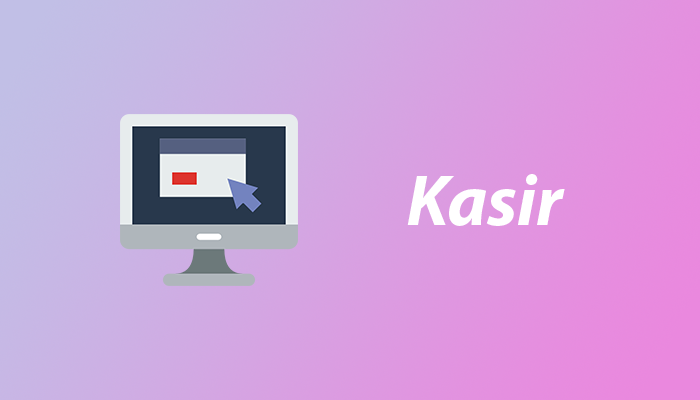
<style>
.page{position:relative;width:700px;height:400px}
.page>*{position:absolute;margin:0}
.t1{font:72px "MyriadPro-BoldIt";color:#ffffff}
</style>
<div class="page">
<p class="t1" style="left:407px;top:174px;width:158px;height:52px">Kasir</p>
</div>
